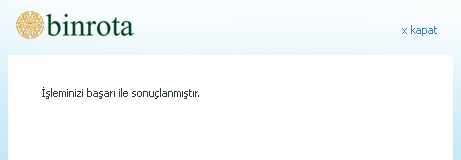
<style>
.page{position:relative;width:461px;height:160px;background:#ffffff}
.page>*{position:absolute;margin:0}
.t1{font:11px "Tahoma";color:#3f82ad}
.t2{font:11px "Tahoma";color:#2e3c3f}
</style>
<div class="page">
<p class="t1" style="left:402px;top:25px;width:35px;height:11px">x kapat</p>
<p class="t2" style="left:42px;top:87px;width:157px;height:12px">İşleminizi başarı ile sonuçlanmıştır.</p>
</div>
